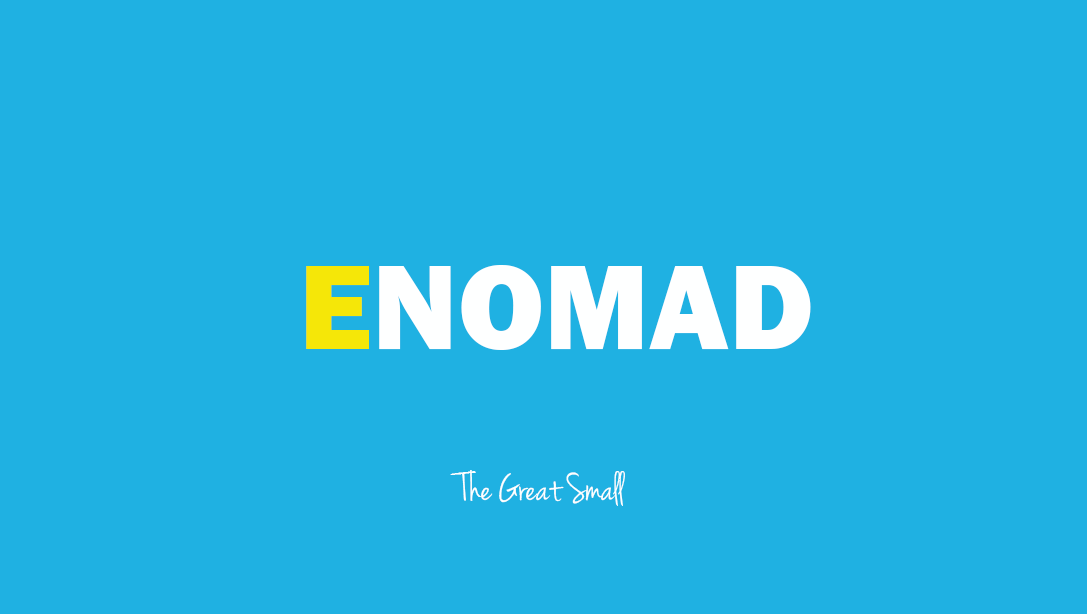
<style>
.page{position:relative;width:1087px;height:614px;background:#1fb1e2}
.page>*{position:absolute;margin:0}
.t1{font:125px "FranklinGothic-Heavy";color:#feffff}
.t2{font:125px "FranklinGothic-Heavy";color:#f5e708}
.t3{font:41.7px "JennaSue";color:#feffff}
</style>
<div class="page">
<p class="t1" style="left:306px;top:265px;width:505px;height:85px"><span class="t2">E</span>NOMAD</p>
<p class="t3" style="left:450px;top:470px;width:175px;height:36px">The Great Small</p>
</div>
